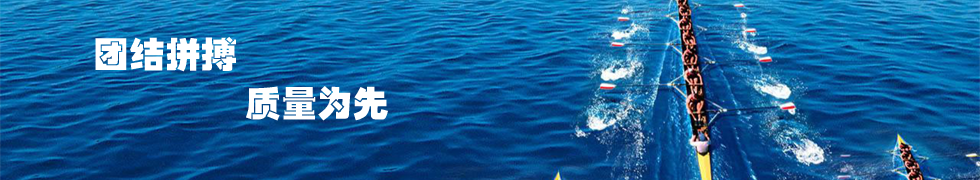
<style>
.page{position:relative;width:980px;height:180px}
.page>*{position:absolute;margin:0}
.t1{font:36px "HYb4gj";color:#ffffff}
</style>
<div class="page">
<p class="t1" style="left:95px;top:36px;width:141px;height:36px">团结拼搏</p>
<p class="t1" style="left:246px;top:86px;width:142px;height:35px">质量为先</p>
</div>
